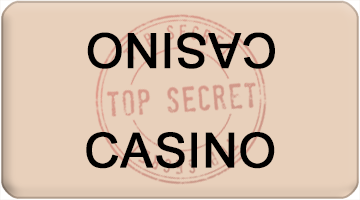
<style>
.page{position:relative;width:360px;height:200px;background:#e8d0bb}
.page>*{position:absolute;margin:0}
.t1{font:48px "ArialMT";color:#000000;font-weight:bold}
</style>
<div class="page">
<p class="t1" style="left:87px;top:32px;width:188px;height:37px;rotate:180deg">CASINO</p>
<p class="t1" style="left:86px;top:132px;width:189px;height:37px">CASINO</p>
</div>
